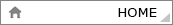
<style>
.page{position:relative;width:173px;height:25px;background:#ffffff}
.page>*{position:absolute;margin:0}
.t1{font:13.2px "Verdana";color:#000000}
</style>
<div class="page">
<p class="t1" style="left:118px;top:8px;width:39px;height:9px">HOME</p>
</div>
